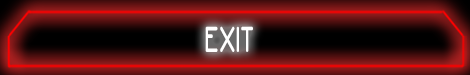
<style>
.page{position:relative;width:470px;height:75px}
.page>*{position:absolute;margin:0}
.t1{font:36px "Neon80s";color:#ffffff;scale:0.67 1}
</style>
<div class="page">
<p class="t1" style="left:205px;top:26px;width:48px;height:26px">EXIT</p>
</div>
